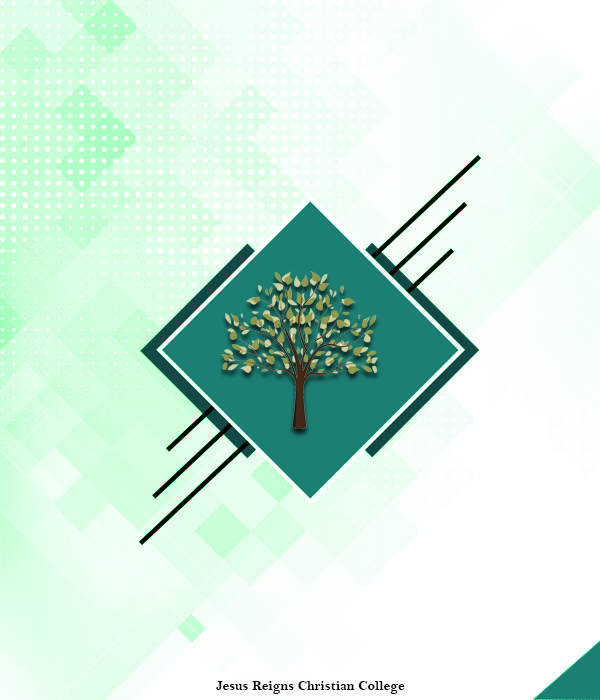
<style>
.page{position:relative;width:600px;height:700px}
.page>*{position:absolute;margin:0}
.t1{font:14px "BellMTBold";color:#060606}
</style>
<div class="page">
<p class="t1" style="left:216px;top:681px;width:189px;height:13px">Jesus Reigns Christian College</p>
</div>
